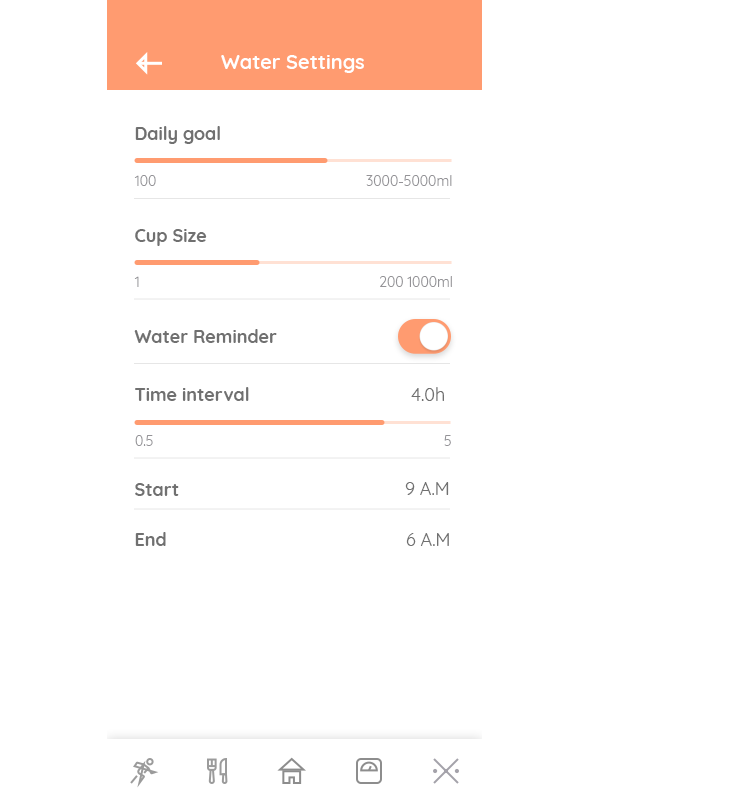
<style>
.page{position:relative;width:743px;height:812px;background:#ffffff}
.page>*{position:absolute;margin:0}
.t1{font:20px "Quicksand-Bold";color:#ffffff}
.t2{font:18px "Quicksand-Bold";color:#707070}
.t3{font:14px "Quicksand-Regular";color:#949397}
.t4{font:18px "Quicksand-Regular";color:#707070}
</style>
<div class="page">
<p class="t1" style="left:221px;top:55px;width:143px;height:18px">Water Settings</p>
<p class="t2" style="left:135px;top:126px;width:85px;height:18px">Daily goal</p>
<p class="t3" style="left:134px;top:175px;width:22px;height:11px">100</p>
<p class="t3" style="left:366px;top:175px;width:86px;height:11px">3000-5000ml</p>
<p class="t2" style="left:135px;top:229px;width:72px;height:17px">Cup Size</p>
<p class="t3" style="left:134px;top:276px;width:5px;height:11px">1</p>
<p class="t3" style="left:380px;top:276px;width:72px;height:11px">200 1000ml</p>
<p class="t2" style="left:134px;top:329px;width:143px;height:14px">Water Reminder</p>
<p class="t2" style="left:135px;top:387px;width:114px;height:14px">Time interval</p>
<p class="t4" style="left:411px;top:387px;width:33px;height:14px">4.0h</p>
<p class="t3" style="left:135px;top:435px;width:18px;height:11px">0.5</p>
<p class="t3" style="left:444px;top:435px;width:7px;height:11px">5</p>
<p class="t2" style="left:135px;top:483px;width:44px;height:13px">Start</p>
<p class="t4" style="left:405px;top:482px;width:44px;height:13px">9 A.M</p>
<p class="t2" style="left:135px;top:532px;width:31px;height:14px">End</p>
<p class="t4" style="left:406px;top:533px;width:43px;height:13px">6 A.M</p>
</div>
